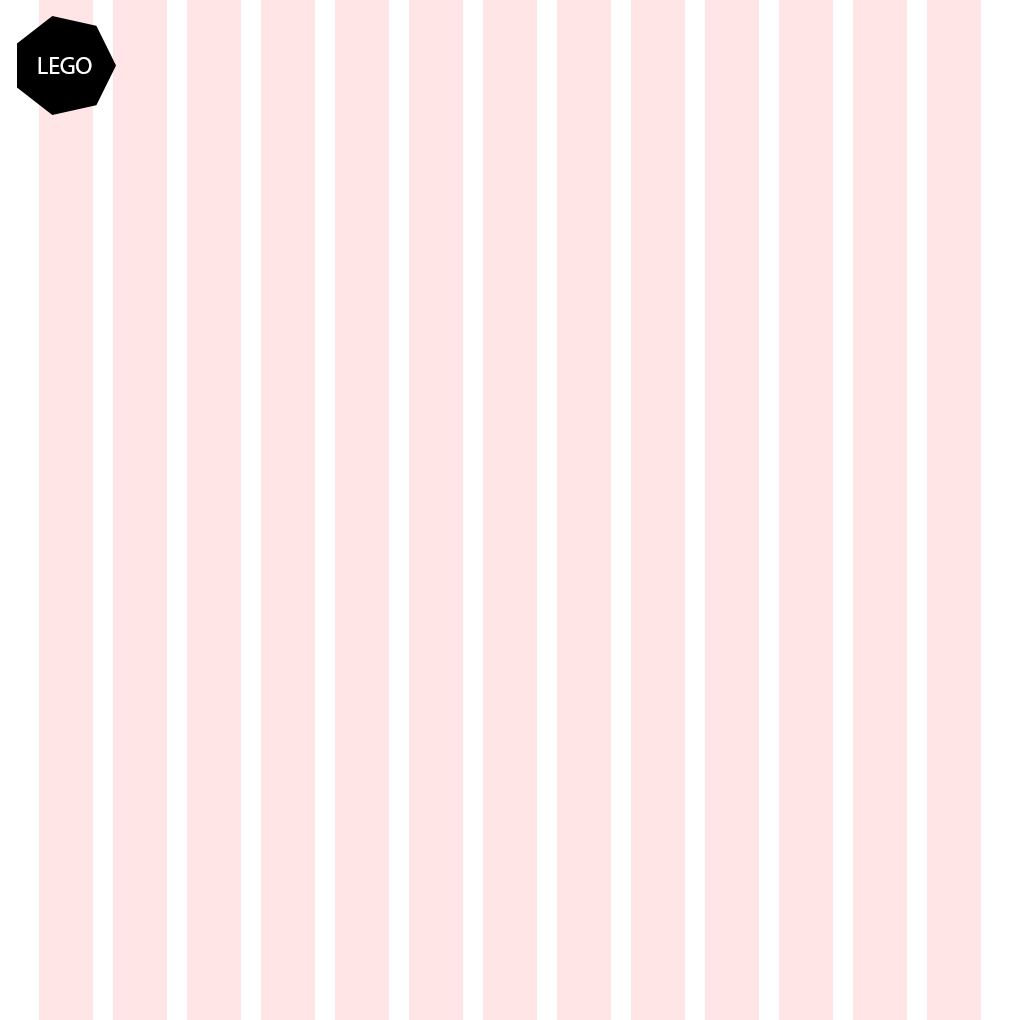
<style>
.page{position:relative;width:1020px;height:1020px;background:#ffe5e5}
.page>*{position:absolute;margin:0}
.t1{font:24px "MyriadPro-Regular";color:#ffffff}
</style>
<div class="page">
<p class="t1" style="left:38px;top:57px;width:54px;height:17px">LEGO</p>
</div>
